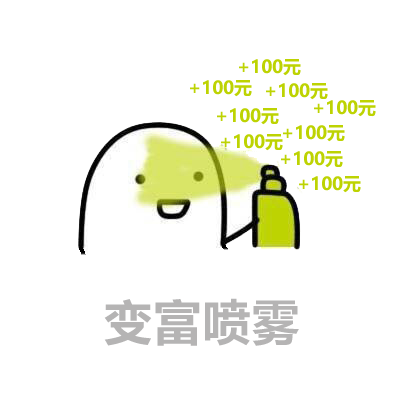
<style>
.page{position:relative;width:400px;height:400px;background:#ffffff}
.page>*{position:absolute;margin:0}
.t1{font:18px "MicrosoftYaHei-Bold";letter-spacing:-0.01em;color:#bdd302}
.t2{font:48px "MicrosoftYaHei-Bold";letter-spacing:0.025em;color:#b5b4b4}
</style>
<div class="page">
<p class="t1" style="left:239px;top:59px;width:62px;height:17px">+100元</p>
<p class="t1" style="left:190px;top:80px;width:62px;height:17px">+100元</p>
<p class="t1" style="left:266px;top:83px;width:62px;height:17px">+100元</p>
<p class="t1" style="left:314px;top:100px;width:62px;height:17px">+100元</p>
<p class="t1" style="left:217px;top:108px;width:62px;height:17px">+100元</p>
<p class="t1" style="left:283px;top:125px;width:62px;height:17px">+100元</p>
<p class="t1" style="left:221px;top:134px;width:62px;height:17px">+100元</p>
<p class="t1" style="left:281px;top:151px;width:62px;height:17px">+100元</p>
<p class="t1" style="left:299px;top:176px;width:62px;height:17px">+100元</p>
<p class="t2" style="left:104px;top:298px;width:195px;height:48px">变富喷雾</p>
</div>
